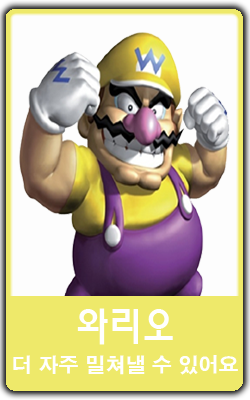
<style>
.page{position:relative;width:250px;height:400px;background:#eee96a}
.page>*{position:absolute;margin:0}
.t1{font:40px "MoeumTR-HM";color:#ffffff}
.t2{font:20px "H2gtrE";color:#ffffff}
</style>
<div class="page">
<p class="t1" style="left:77px;top:308px;width:96px;height:37px">와리오</p>
<p class="t2" style="left:13px;top:355px;width:225px;height:20px">더 자주 밀쳐낼 수 있어요</p>
</div>
